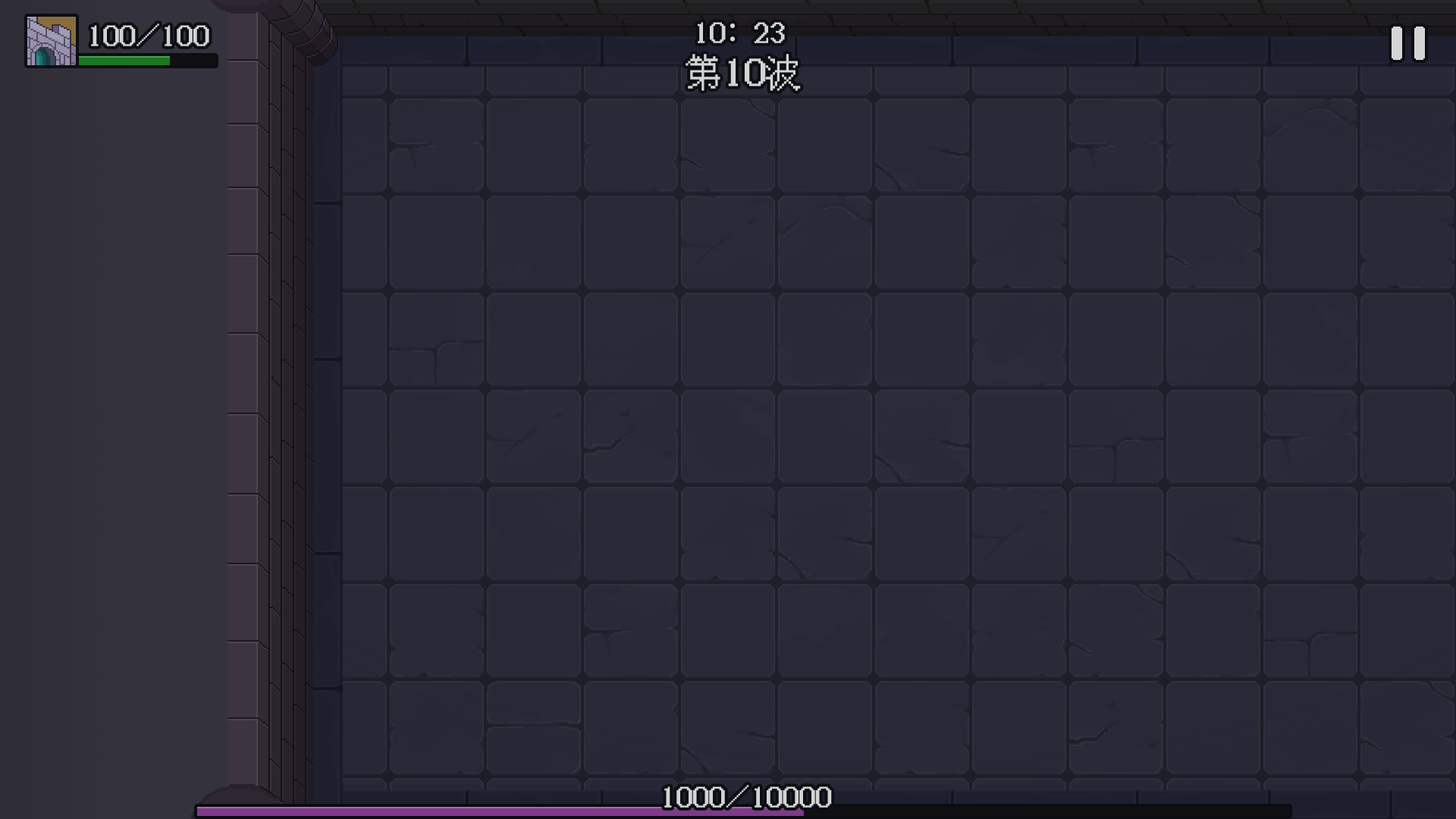
<style>
.page{position:relative;width:1456px;height:819px}
.page>*{position:absolute;margin:0}
.t1{font:27.3px "IPix";color:#d4d4d4}
.t2{font:27.3px "AdobeHeitiStd-Regular";color:#d4d4d4}
.t3{font:36.4px "IPix";color:#d4d4d4}
</style>
<div class="page">
<p class="t1" style="left:91px;top:24px;width:118px;height:22px">100/100</p>
<p class="t1" style="left:698px;top:22px;width:87px;height:21px">10<span class="t2">：</span>23</p>
<p class="t3" style="left:686px;top:54px;width:115px;height:37px">第10波</p>
<p class="t1" style="left:664px;top:785px;width:168px;height:23px">1000/10000</p>
</div>
